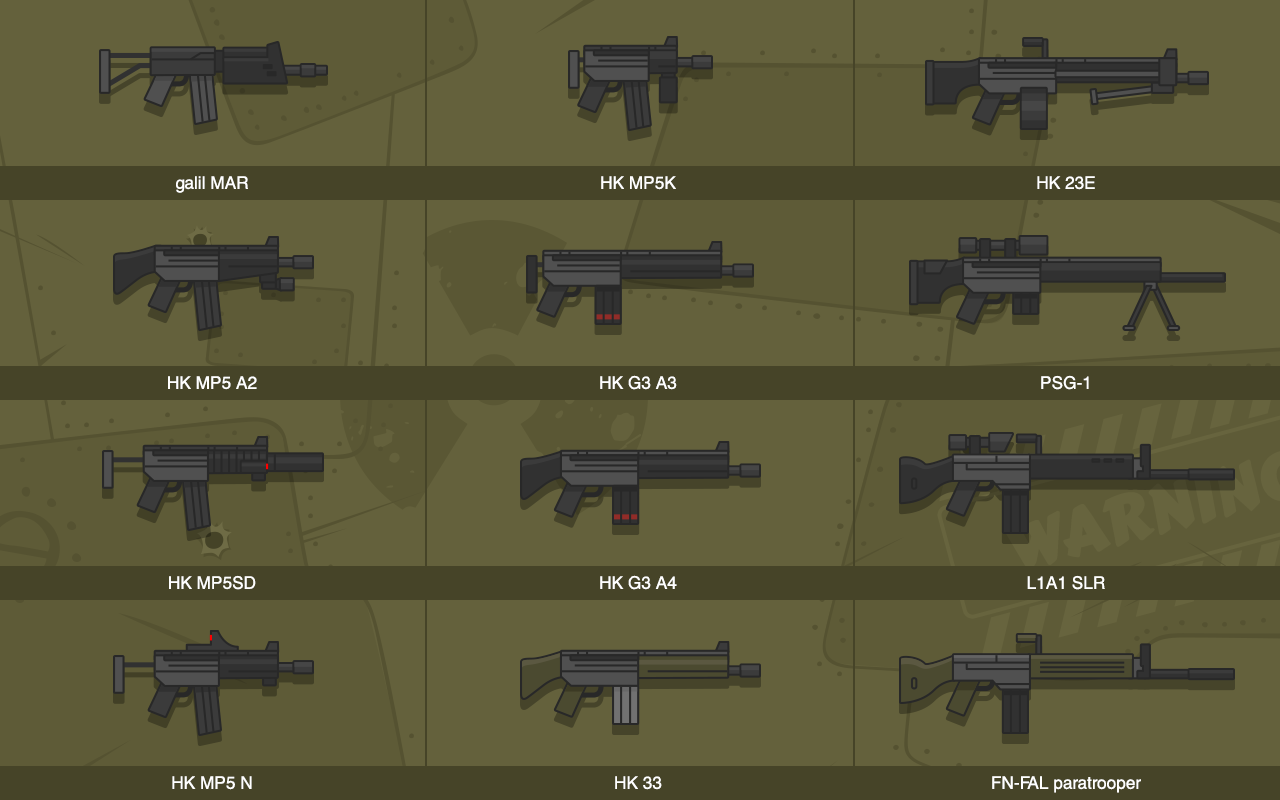
<style>
.page{position:relative;width:1280px;height:800px;background:#64613c}
.page>*{position:absolute;margin:0}
.t1{font:17.4px/200px "HelveticaCE-Regular";color:#ffffff}
</style>
<div class="page">
<p class="t1" style="left:168px;top:176px;width:89px;height:614px;text-align:center">galil MAR<br>HK MP5 A2<br>HK MP5SD<br>HK MP5 N</p>
<p class="t1" style="left:600px;top:176px;width:77px;height:614px;text-align:center">HK MP5K<br>HK G3 A3<br>HK G3 A4<br>HK 33</p>
<p class="t1" style="left:992px;top:176px;width:149px;height:617px;text-align:center">HK 23E<br>PSG-1<br>L1A1 SLR<br>FN-FAL paratrooper</p>
</div>
